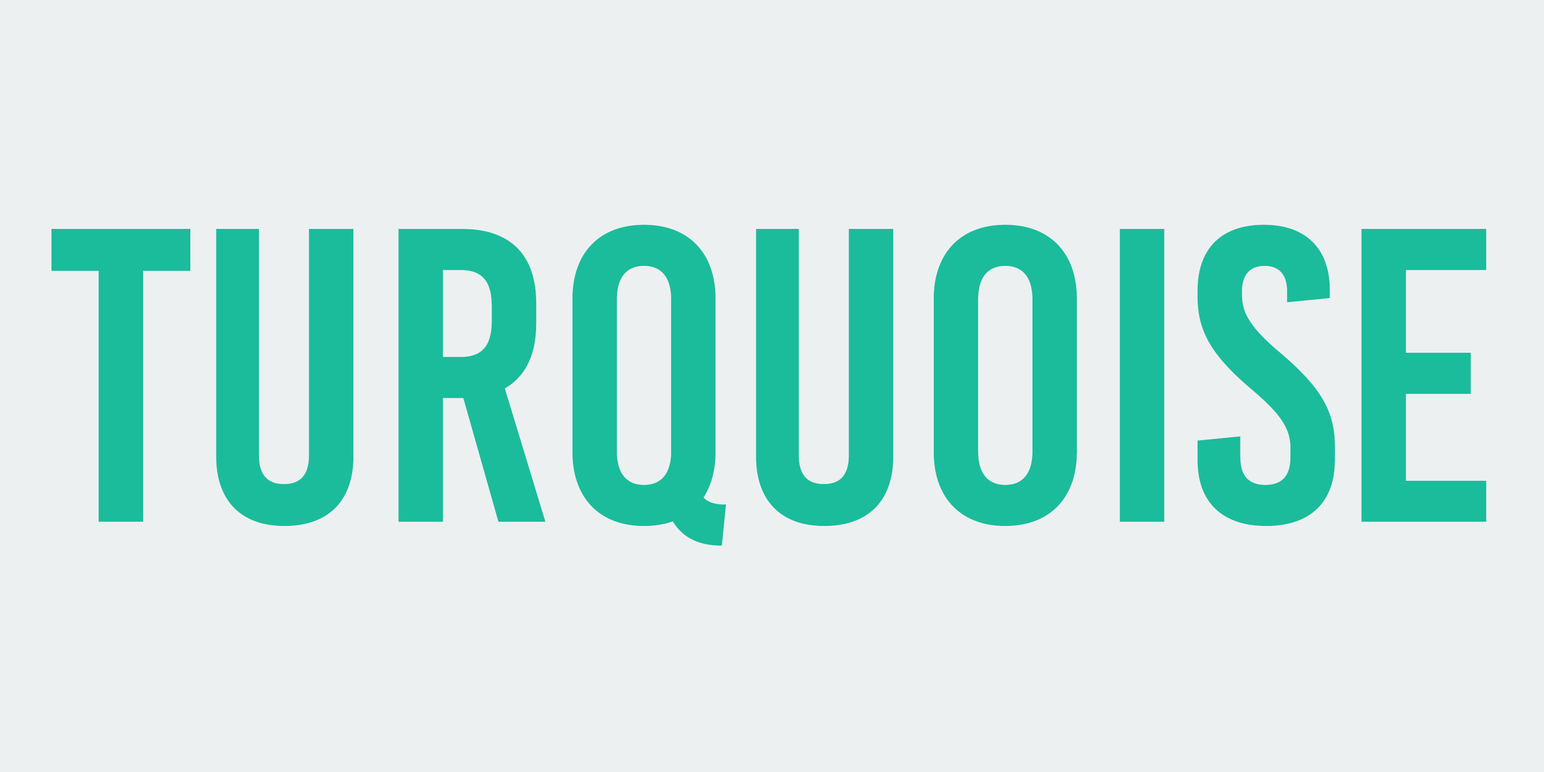
<style>
.page{position:relative;width:1544px;height:772px;background:#ecf0f1}
.page>*{position:absolute;margin:0}
.t1{font:418.2px "BebasKai";color:#1abc9c}
</style>
<div class="page">
<p class="t1" style="left:51px;top:225px;width:1436px;height:321px">turquoise</p>
</div>
